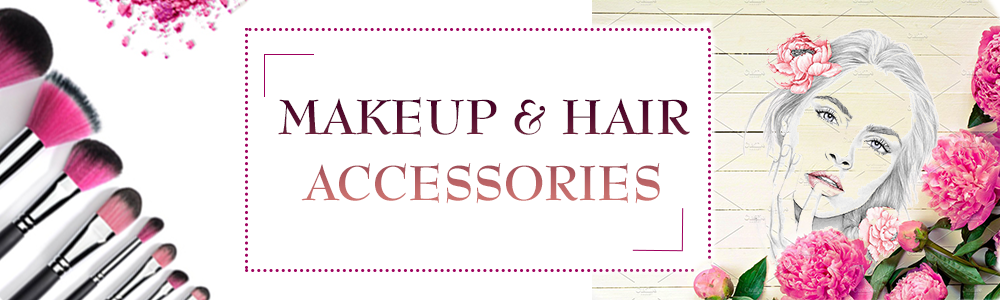
<style>
.page{position:relative;width:1000px;height:300px;background:#ffffff}
.page>*{position:absolute;margin:0}
.t1{font:48px/22px "UVNBaiHocBold";letter-spacing:0.001em}
</style>
<div class="page">
<p class="t1" style="left:278px;top:97px;width:412px;height:107px;text-align:center">MAKEUP &amp; HAIR<br><br><br>ACCESSORIES</p>
</div>
